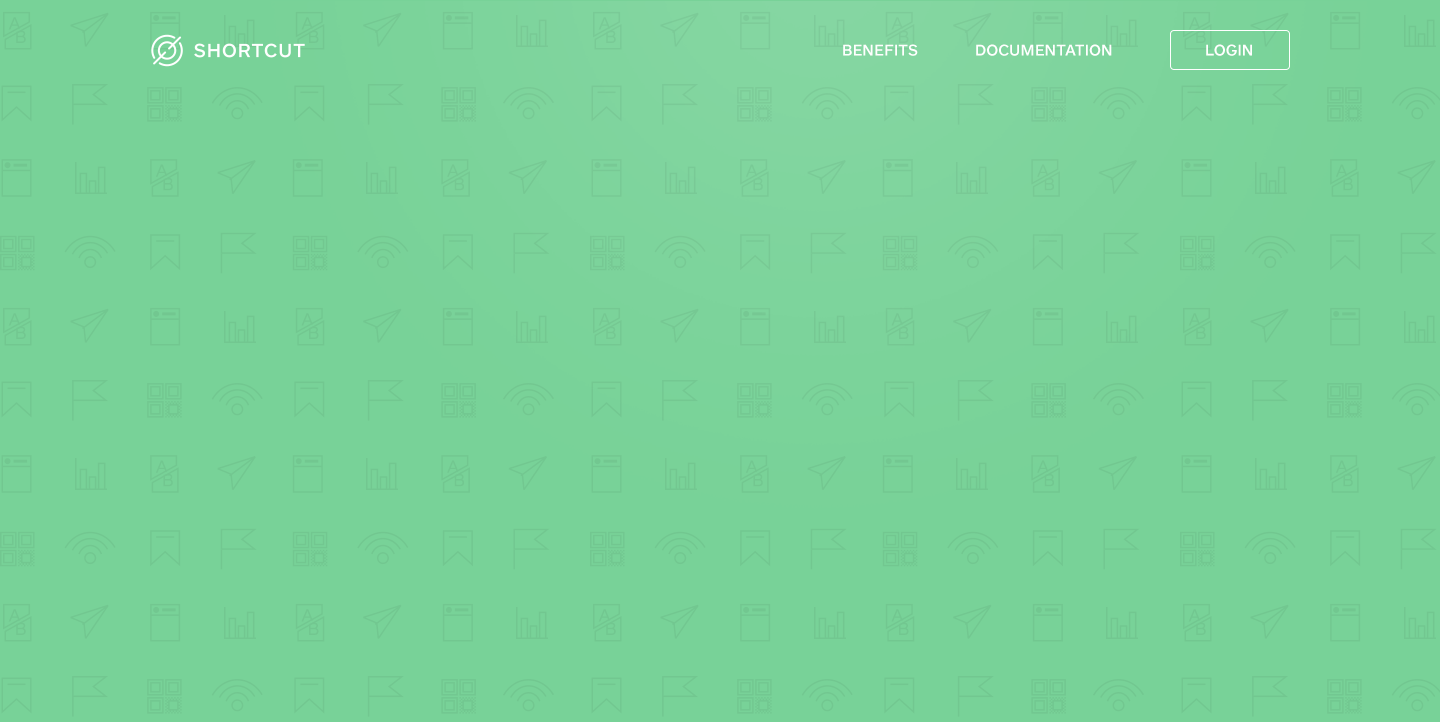
<style>
.page{position:relative;width:1440px;height:723px;background:#78d298}
.page>*{position:absolute;margin:0}
.t1{font:16px "ARSMaquettePro-Medium";color:#ffffff;text-transform:uppercase}
</style>
<div class="page">
<p class="t1" style="left:843px;top:44px;width:75px;height:12px">Benefits</p>
<p class="t1" style="left:976px;top:44px;width:136px;height:12px">Documentation</p>
<p class="t1" style="left:1206px;top:44px;width:46px;height:12px">Login</p>
</div>
